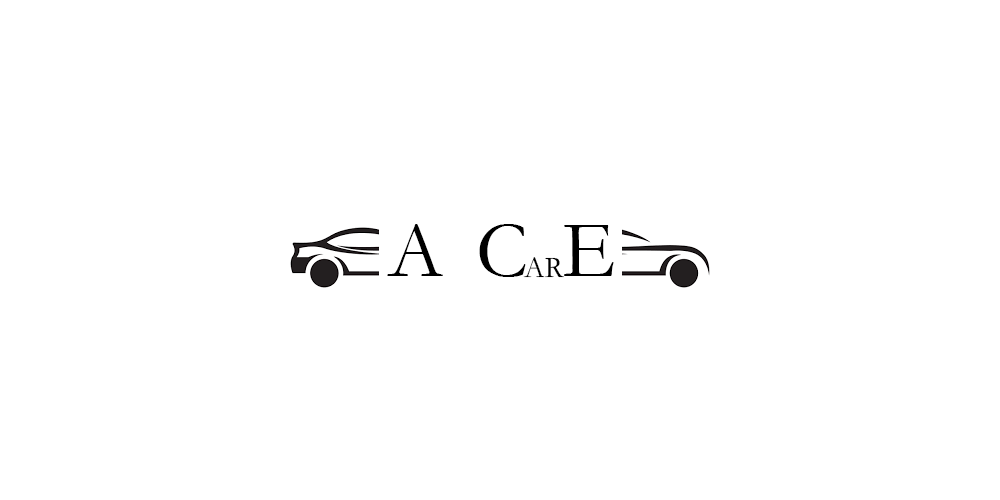
<style>
.page{position:relative;width:1000px;height:500px;background:#ffffff}
.page>*{position:absolute;margin:0}
.t1{font:82.1px "Garamond";letter-spacing:0.4em;color:#000000}
.t2{font:30.2px "Garamond";color:#000000}
</style>
<div class="page">
<p class="t1" style="left:387px;top:224px;width:227px;height:53px">ACE</p>
<p class="t2" style="left:523px;top:257px;width:41px;height:21px">AR</p>
</div>
